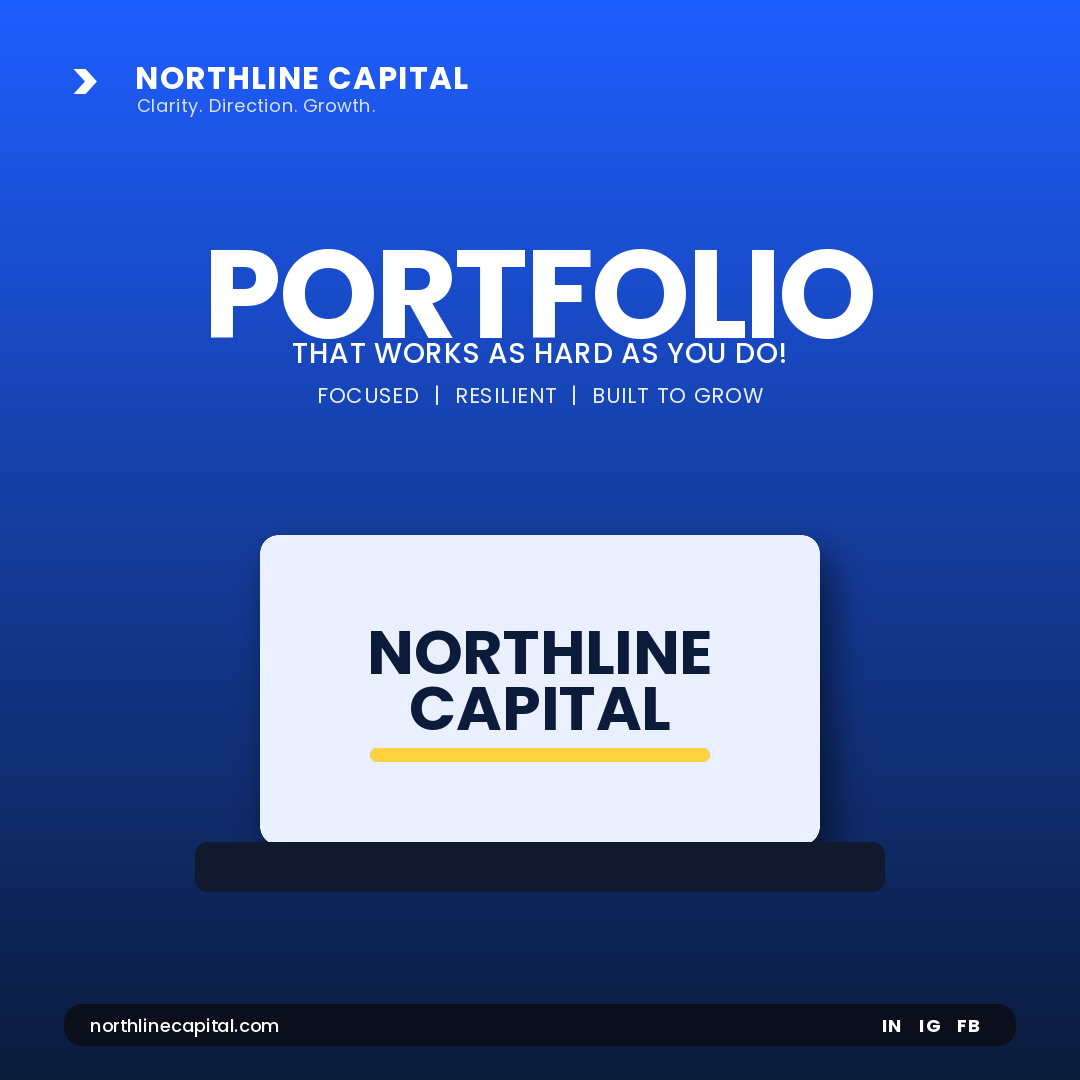
<style>
.page{position:relative;width:1080px;height:1080px}
.page>*{position:absolute;margin:0}
.t1{font:56px "Poppins-Bold";color:#ffffff}
.t2{font:31px "Poppins-Bold";letter-spacing:0.045em;color:#ffffff}
.t3{font:18px "Poppins-Regular";letter-spacing:0.03em;color:#d7e1ff}
.t4{font:126px "Poppins-Bold";letter-spacing:-0.025em;color:#ffffff}
.t5{font:28px "Poppins-Medium";letter-spacing:0.025em;color:#ffffff}
.t6{font:21px "Poppins-Regular";letter-spacing:0.055em;color:#eaf0ff}
.t7{font:62px/55.8px "Poppins-Bold";color:#0b1b3a}
.t8{font:18px "Poppins-Medium";color:#ffffff}
.t9{font:18px "Poppins-Bold";letter-spacing:0.08em;color:#ffffff}
</style>
<div class="page">
<p class="t1" style="left:73px;top:69px;width:24px;height:25px">&gt;</p>
<p class="t2" style="left:137px;top:67px;width:331px;height:22px">NORTHLINE CAPITAL</p>
<p class="t3" style="left:138px;top:98px;width:237px;height:19px">Clarity. Direction. Growth.</p>
<p class="t4" style="left:211px;top:249px;width:662px;height:90px">PORTFOLIO</p>
<p class="t5" style="left:293px;top:343px;width:492px;height:20px">THAT WORKS AS HARD AS YOU DO!</p>
<p class="t6" style="left:319px;top:385px;width:444px;height:20px">FOCUSED  |  RESILIENT  |  BUILT TO GROW</p>
<p class="t7" style="left:371px;top:630px;width:339px;height:100px;text-align:center">NORTHLINE<br>CAPITAL</p>
<p class="t8" style="left:91px;top:1018px;width:188px;height:19px">northlinecapital.com</p>
<p class="t9" style="left:883px;top:1020px;width:97px;height:12px">IN   IG   FB</p>
</div>
